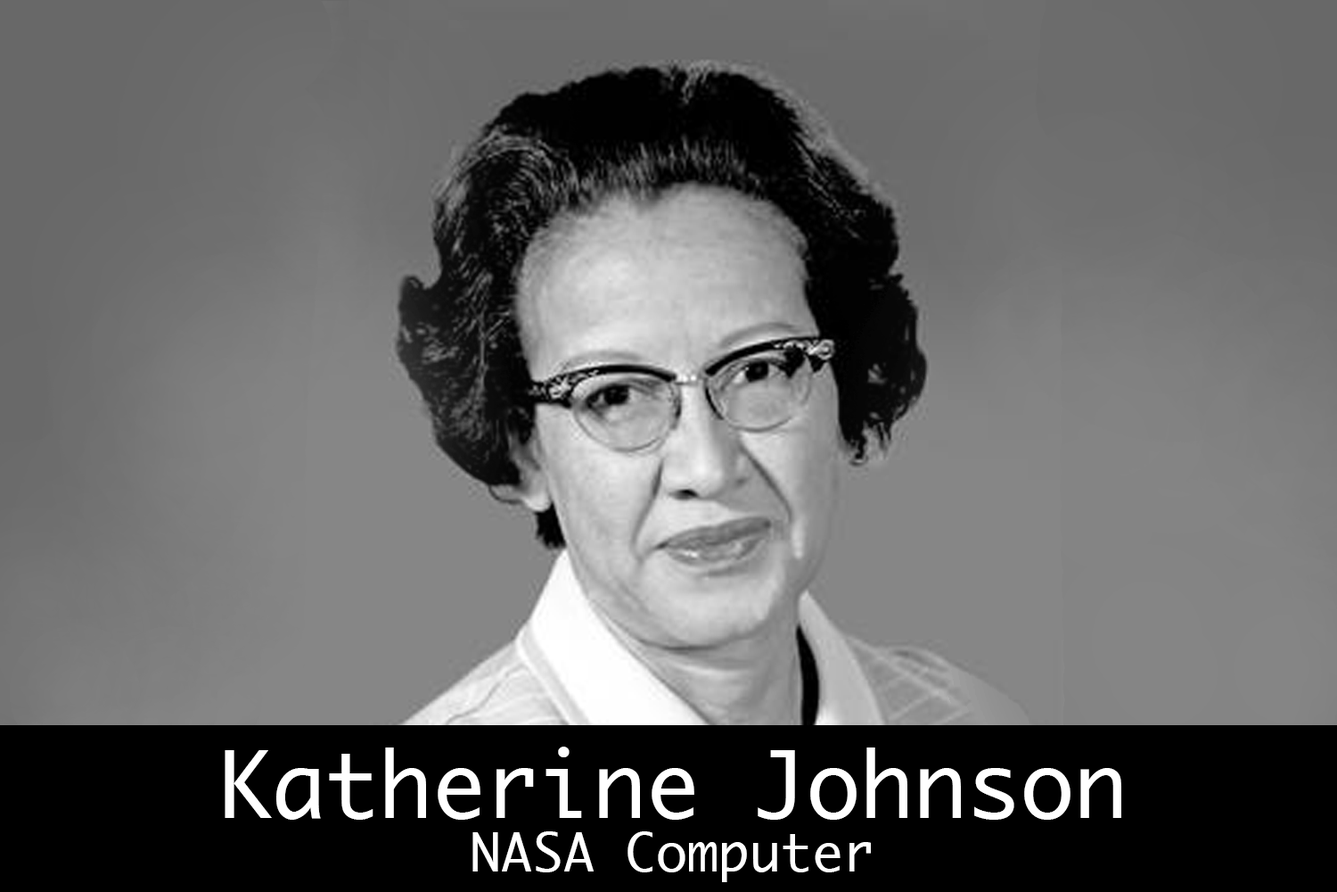
<style>
.page{position:relative;width:1337px;height:892px}
.page>*{position:absolute;margin:0}
.t1{font:89.2px "Ayuthaya";color:#ffffff}
.t2{font:52px "Ayuthaya";color:#ffffff}
</style>
<div class="page">
<p class="t1" style="left:225px;top:746px;width:897px;height:73px">Katherine Johnson</p>
<p class="t2" style="left:473px;top:831px;width:398px;height:51px">NASA Computer</p>
</div>
